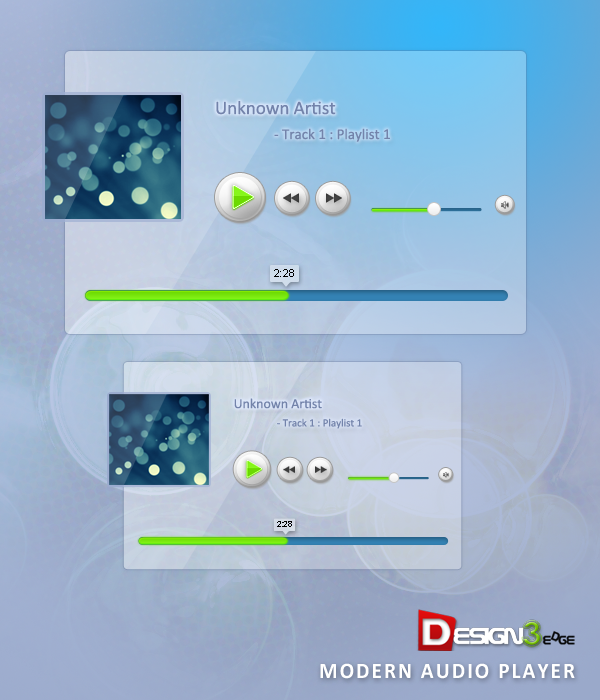
<style>
.page{position:relative;width:600px;height:700px}
.page>*{position:absolute;margin:0}
.t1{font:19px "Calibri";color:#7383aa}
.t2{font:15px "Calibri";color:#7383aa}
.t3{font:11px "ArialMT";color:#000000}
.t4{font:13.9px "Calibri";color:#7383aa}
.t5{font:11px "Calibri";color:#7383aa}
.t6{font:8.1px "ArialMT";color:#000000}
.t7{font:22.2px "Calibri-Bold";letter-spacing:0.1em;color:#ffffff;text-transform:uppercase;scale:0.95 1}
</style>
<div class="page">
<p class="t1" style="left:216px;top:101px;width:120px;height:14px">Unknown Artist</p>
<p class="t2" style="left:274px;top:128px;width:116px;height:14px">- Track 1 : Playlist 1</p>
<p class="t3" style="left:274px;top:269px;width:20px;height:8px">2:28</p>
<p class="t4" style="left:234px;top:398px;width:88px;height:11px">Unknown Artist</p>
<p class="t5" style="left:277px;top:418px;width:85px;height:11px">- Track 1 : Playlist 1</p>
<p class="t6" style="left:277px;top:521px;width:15px;height:6px">2:28</p>
<p class="t7" style="left:320px;top:663px;width:255px;height:16px">MODERN AUDIO PLAYER</p>
</div>
